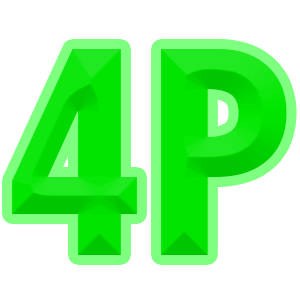
<style>
.page{position:relative;width:300px;height:300px;background:#ffffff}
.page>*{position:absolute;margin:0}
.t1{font:316px "TwCenMT-CondensedExtraBold";letter-spacing:-0.04em;color:#00e600}
</style>
<div class="page">
<p class="t1" style="left:12px;top:49px;width:275px;height:206px">4P</p>
</div>
